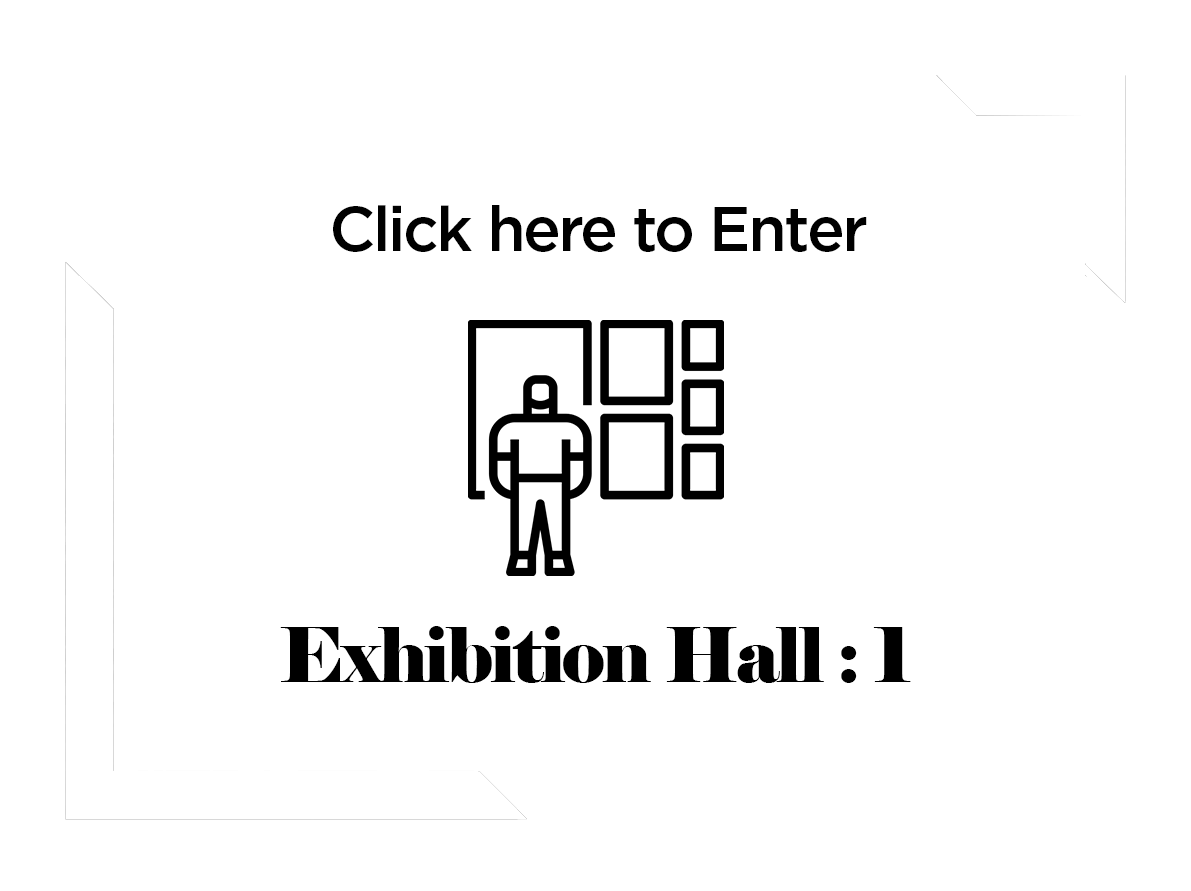
<style>
.page{position:relative;width:1191px;height:891px;background:#ffffff}
.page>*{position:absolute;margin:0}
.t1{font:62.5px "Gotham-Medium";letter-spacing:-0.04em;color:#000000}
.t2{font:75px "Elephant-Regular";letter-spacing:-0.04em;color:#000000}
</style>
<div class="page">
<p class="t1" style="left:333px;top:205px;width:534px;height:47px">Click here to Enter</p>
<p class="t2" style="left:280px;top:626px;width:631px;height:57px">Exhibition Hall : 1</p>
</div>
